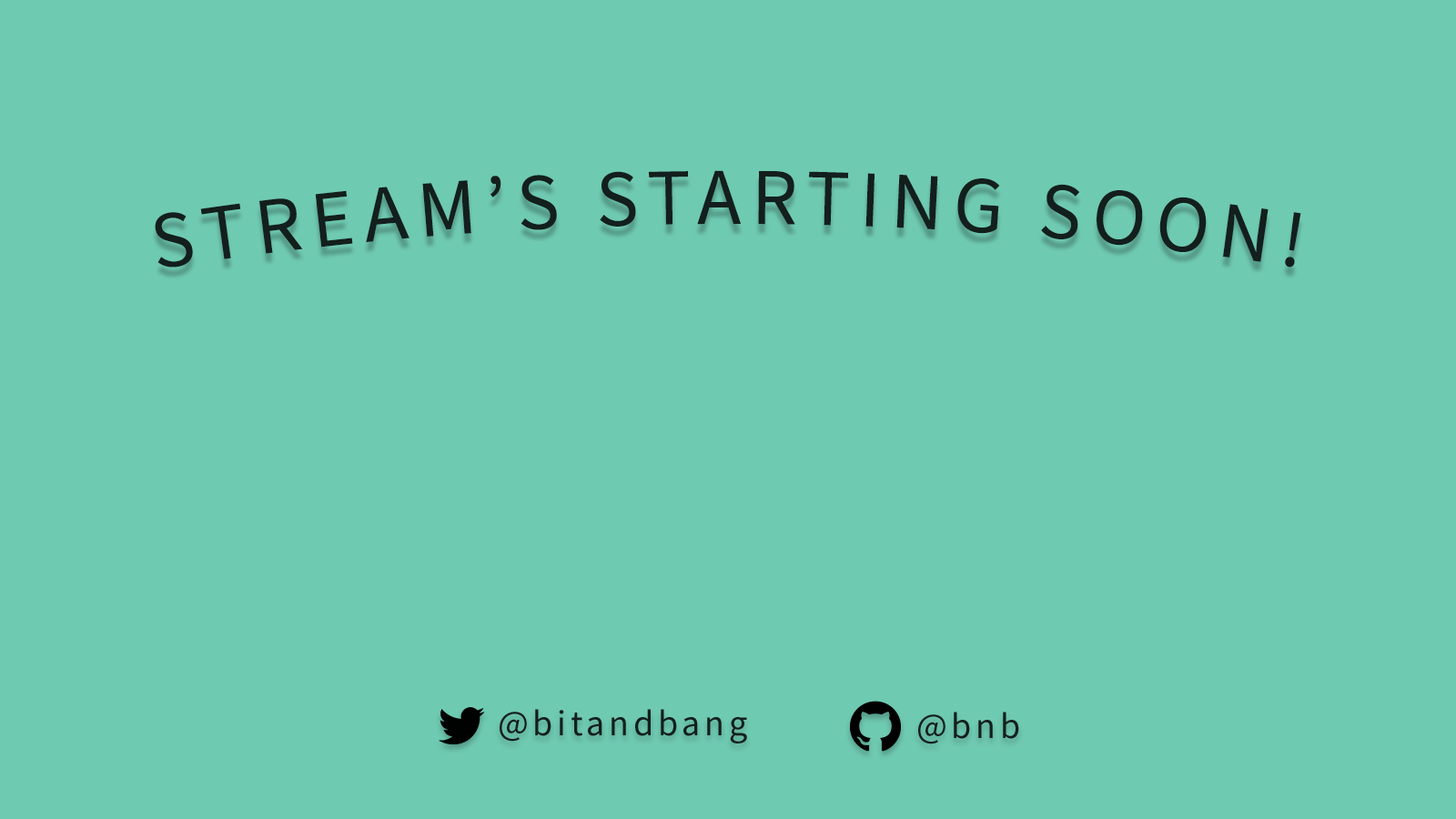
<style>
.page{position:relative;width:1456px;height:819px;background:#6fcab2}
.page>*{position:absolute;margin:0}
.t1{font:80.1px "SourceSansPro-Regular";letter-spacing:0.12em;color:#131f1c;text-transform:uppercase}
.t2{font:36.4px "SourceSansPro-Regular";letter-spacing:0.12em;color:#131f1c}
</style>
<div class="page">
<p class="t1" style="left:155px;top:170px;width:1146px;height:98px">Stream’s Starting Soon!</p>
<p class="t2" style="left:500px;top:709px;width:247px;height:34px">@bitandbang</p>
<p class="t2" style="left:918px;top:712px;width:101px;height:32px">@bnb</p>
</div>
